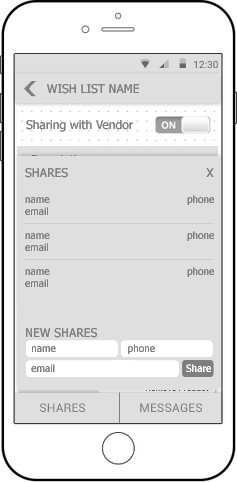
<style>
.page{position:relative;width:237px;height:482px;background:#dfdfdf}
.page>*{position:absolute;margin:0}
.t1{font:12px "Tahoma";color:#7f7f7f}
.t2{font:10px "Tahoma";color:#7f7f7f}
.t3{font:10px/15px "Tahoma";color:#7f7f7f}
.t4{font:10px/20px "Tahoma";color:#7f7f7f}
.t5{font:10px/20px "Tahoma";color:#ffffff}
.t6{font:12.3px "Roboto-Regular";letter-spacing:0.005em;color:#7f7f7f}
</style>
<div class="page">
<p class="t1" style="left:47px;top:84px;width:92px;height:10px">WISH LIST NAME</p>
<p class="t1" style="left:26px;top:120px;width:107px;height:12px">Sharing with Vendor</p>
<p class="t2" style="left:25px;top:168px;width:189px;height:204px"><span class="t1">SHARES                                     X<br><br></span>name                                            phone<br>email<br><br>name                                            phone<br>email<br><br>name                                            phone<br>email<br><br><br><br><span class="t1">NEW SHARES<br></span><span class="t3">  name                       phone<br></span><span class="t4">  email                                         </span><span class="t5"> Share</span></p>
<p class="t6" style="left:40px;top:403px;width:162px;height:9px">SHARES                 MESSAGES</p>
</div>
